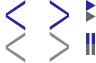
<style>
.page{position:relative;width:96px;height:63px;background:#ffffff}
.page>*{position:absolute;margin:0}
.t1{font:81.5px "SourceSansPro-Light";color:#292896;scale:0.59 1}
.t2{font:81.1px "SourceSansPro-Light";color:#292896;scale:0.58 1}
.t3{font:81.5px "SourceSansPro-Light";color:#898989;scale:0.59 1}
.t4{font:81.1px "SourceSansPro-Light";color:#898989;scale:0.58 1}
</style>
<div class="page">
<p class="t1" style="left:5px;top:0px;width:21px;height:31px;rotate:180deg">&gt;</p>
<p class="t2" style="left:49px;top:0px;width:20px;height:31px">&gt;</p>
<p class="t3" style="left:5px;top:32px;width:21px;height:31px;rotate:180deg">&gt;</p>
<p class="t4" style="left:49px;top:31px;width:20px;height:31px">&gt;</p>
</div>
